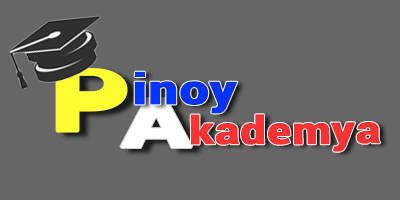
<style>
.page{position:relative;width:400px;height:200px;background:#666666}
.page>*{position:absolute;margin:0}
.t1{font:86px "Roboto-Black";letter-spacing:0.01em;color:#ffff33;font-weight:bold;scale:1.47 1}
.t2{font:42.3px "Roboto-Black";letter-spacing:0.01em;color:#0033ff;font-weight:bold;scale:1.22 1}
.t3{font:66.6px "Roboto-Black";letter-spacing:0.01em;color:#ffffff;font-weight:bold;scale:1.64 1}
.t4{font:38.7px "Roboto-Black";letter-spacing:0.01em;color:#ff3333;font-weight:bold;scale:1.15 1}
</style>
<div class="page">
<p class="t1" style="left:55px;top:68px;width:73px;height:65px">P</p>
<p class="t2" style="left:134px;top:71px;width:104px;height:43px">inoy</p>
<p class="t3" style="left:119px;top:97px;width:74px;height:52px">A</p>
<p class="t4" style="left:190px;top:114px;width:190px;height:38px">kademya</p>
</div>
